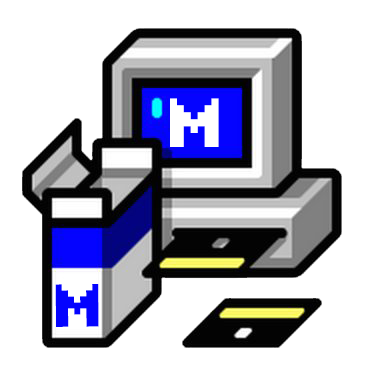
<style>
.page{position:relative;width:377px;height:377px;background:#ffffff}
.page>*{position:absolute;margin:0}
.t1{font:80px "8bitOperatorPlus8-Bold";color:#ffffff;text-transform:uppercase}
.t2{font:70px "8bitOperatorPlus8-Bold";color:#0403ff;text-transform:uppercase}
</style>
<div class="page">
<p class="t1" style="left:170px;top:98px;width:49px;height:49px">M</p>
<p class="t2" style="left:55px;top:284px;width:44px;height:43px;rotate:-1deg">M</p>
</div>
